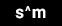
<style>
.page{position:relative;width:62px;height:26px;background:#000000}
.page>*{position:absolute;margin:0}
.t1{font:14px "Roboto-Bold";color:#ffffff;scale:0.95 1}
.t2{font:17px "Roboto-Bold";color:#ffffff}
.t3{font:17px "Roboto-Bold";color:#ffffff;scale:0.97 1}
</style>
<div class="page">
<p class="t1" style="left:25px;top:6px;width:6px;height:5px">^</p>
<p class="t2" style="left:15px;top:8px;width:9px;height:11px">s</p>
<p class="t3" style="left:32px;top:8px;width:14px;height:10px">m</p>
</div>
